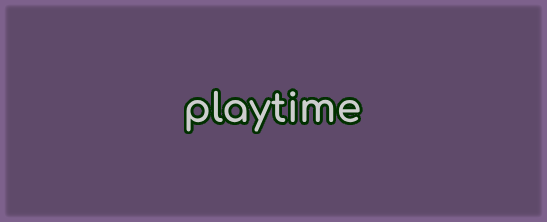
<style>
.page{position:relative;width:547px;height:222px;background:#5f4a6a}
.page>*{position:absolute;margin:0}
.t1{font:40.1px "Comfortaa-Bold";color:#cecece}
</style>
<div class="page">
<p class="t1" style="left:186px;top:90px;width:174px;height:42px">playtime</p>
</div>
